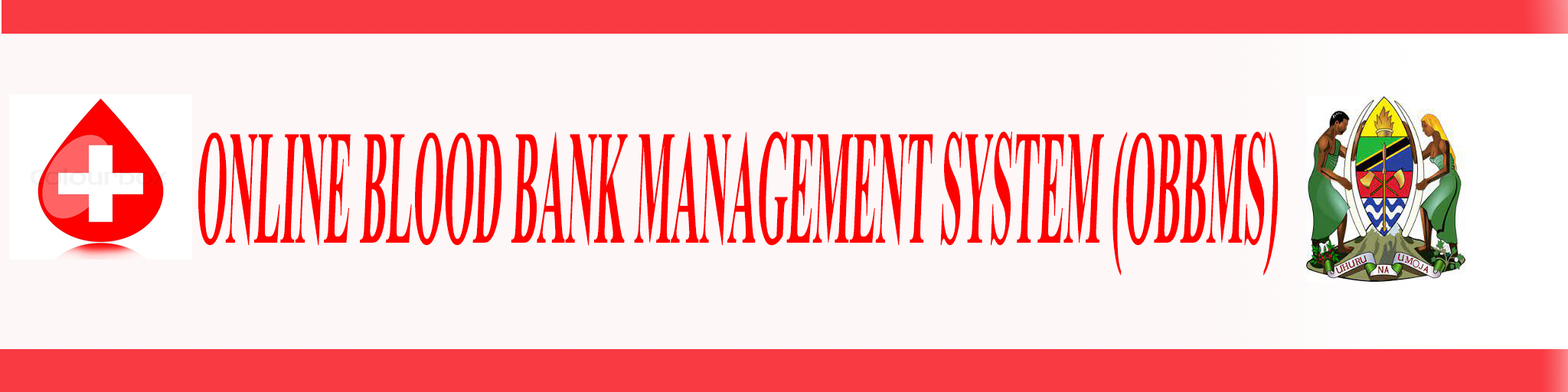
<style>
.page{position:relative;width:1568px;height:392px;background:#fdf7f7}
.page>*{position:absolute;margin:0}
.t1{font:163.7px "TimesNewRomanPS-BoldMT";color:#ff0000;scale:0.24 1}
</style>
<div class="page">
<p class="t1" style="left:198px;top:131px;width:1081px;height:145px">ONLINE BLOOD BANK MANAGEMENT SYSTEM (OBBMS)</p>
</div>
